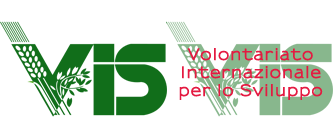
<style>
.page{position:relative;width:334px;height:140px;background:#ffffff}
.page>*{position:absolute;margin:0}
.t1{font:15px "Sansumi-Bold";letter-spacing:0.06em;color:#e41a41;font-weight:bold}
</style>
<div class="page">
<p class="t1" style="left:179px;top:48px;width:144px;height:52px;text-align:center">Volontariato<br>Internazionale<br>per lo Sviluppo</p>
</div>
